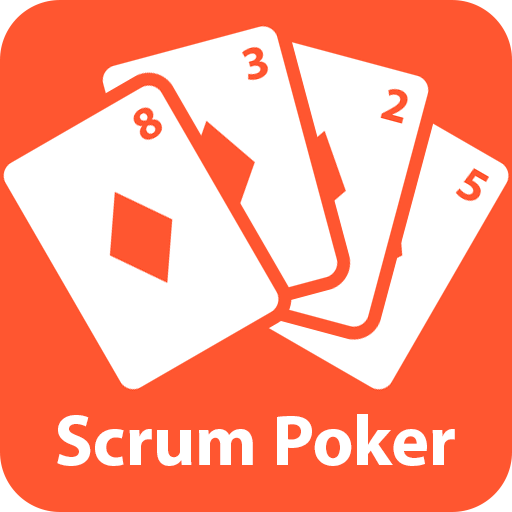
<style>
.page{position:relative;width:512px;height:512px;background:#ff5630}
.page>*{position:absolute;margin:0}
.t1{font:72px "MyriadPro-Bold";color:#ffffff}
</style>
<div class="page">
<p class="t1" style="left:57px;top:414px;width:398px;height:52px">Scrum Poker</p>
</div>
